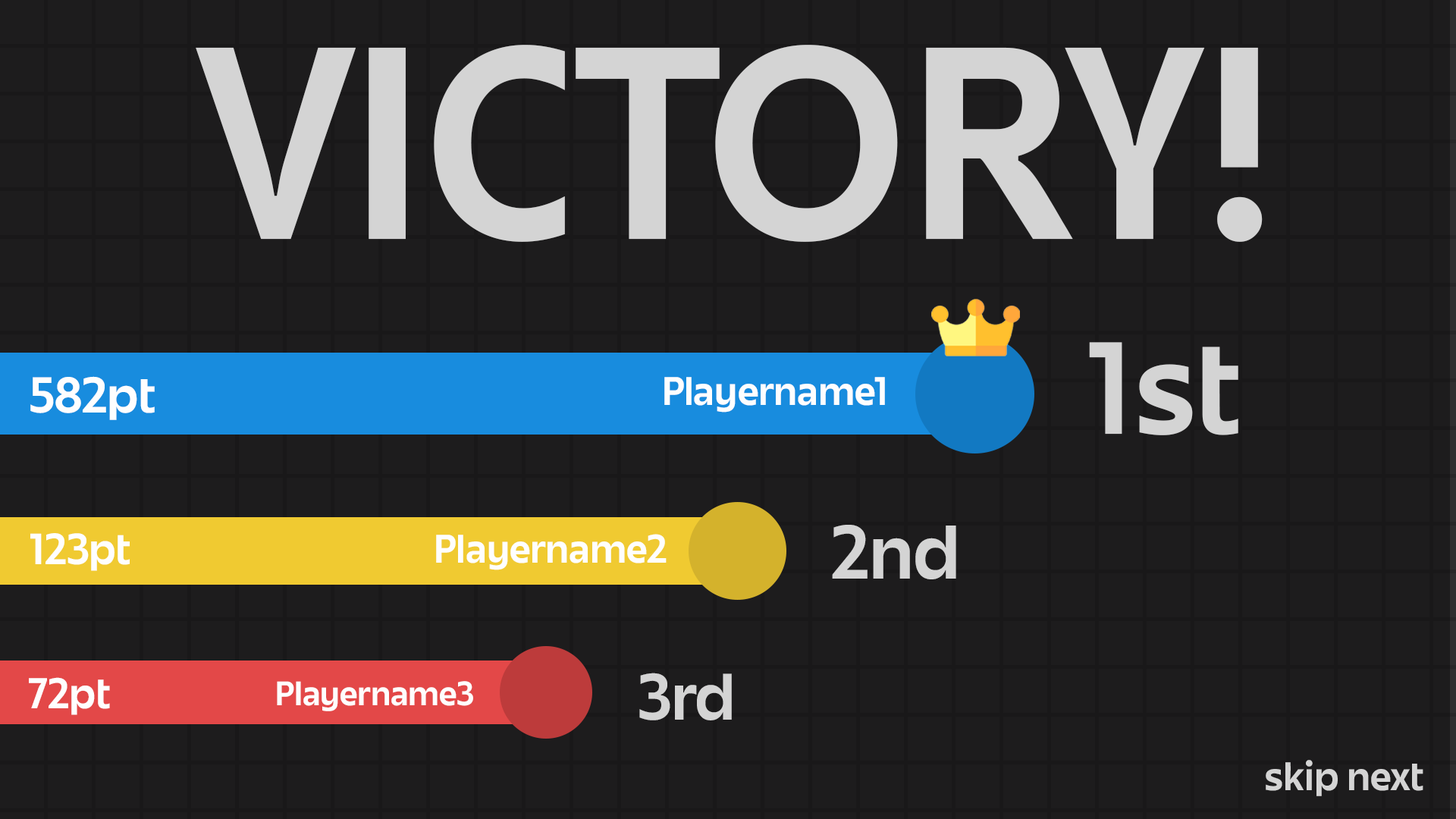
<style>
.page{position:relative;width:1456px;height:819px;background:#1d1c1d}
.page>*{position:absolute;margin:0}
.t1{font:238.9px "JuneExptVariable-Active";color:#d4d4d4}
.t2{font:114.2px "JuneExptVariable-Active";color:#d4d4d4}
.t3{font:44px "JuneExptVariable-Active";color:#fefefe}
.t4{font:34.9px "JuneExptVariable-Active";color:#fefefe}
.t5{font:38.2px "JuneExptVariable-Active";color:#fefefe}
.t6{font:66.4px "JuneExptVariable-Active";color:#d4d4d4}
.t7{font:37.6px "JuneExptVariable-Active";color:#fefefe}
.t8{font:57.3px "JuneExptVariable-Active";color:#d4d4d4}
.t9{font:29.7px "JuneExptVariable-Active";color:#fefefe}
.t10{font:34.9px "JuneExptVariable-Active";color:#d4d4d4}
</style>
<div class="page">
<p class="t1" style="left:196px;top:45px;width:1067px;height:197px">VICTORY!</p>
<p class="t2" style="left:1089px;top:342px;width:149px;height:93px">1st</p>
<p class="t3" style="left:30px;top:376px;width:125px;height:44px">582pt</p>
<p class="t4" style="left:664px;top:377px;width:221px;height:36px">Playername1</p>
<p class="t5" style="left:30px;top:533px;width:100px;height:38px">123pt</p>
<p class="t4" style="left:436px;top:534px;width:231px;height:36px">Playername2</p>
<p class="t6" style="left:832px;top:525px;width:124px;height:54px">2nd</p>
<p class="t7" style="left:29px;top:677px;width:81px;height:38px">72pt</p>
<p class="t8" style="left:639px;top:673px;width:93px;height:47px">3rd</p>
<p class="t9" style="left:277px;top:681px;width:196px;height:30px">Playername3</p>
<p class="t10" style="left:1266px;top:760px;width:157px;height:36px">skip next</p>
</div>
